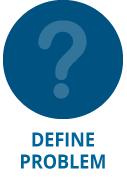
<style>
.page{position:relative;width:127px;height:178px;background:#ffffff}
.page>*{position:absolute;margin:0}
.t1{font:19.6px/22px "OpenSans-Bold";color:#006699;scale:0.92 1}
</style>
<div class="page">
<p class="t1" style="left:21px;top:132px;width:84px;height:37px;text-align:center">DEFINE<br>PROBLEM</p>
</div>
